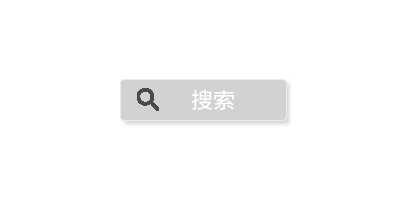
<style>
.page{position:relative;width:400px;height:200px;background:#ffffff}
.page>*{position:absolute;margin:0}
.t1{font:21.6px "NotoSansCJKsc-Regular";color:#ffffff}
</style>
<div class="page">
<p class="t1" style="left:191px;top:89px;width:43px;height:21px">搜索</p>
</div>
